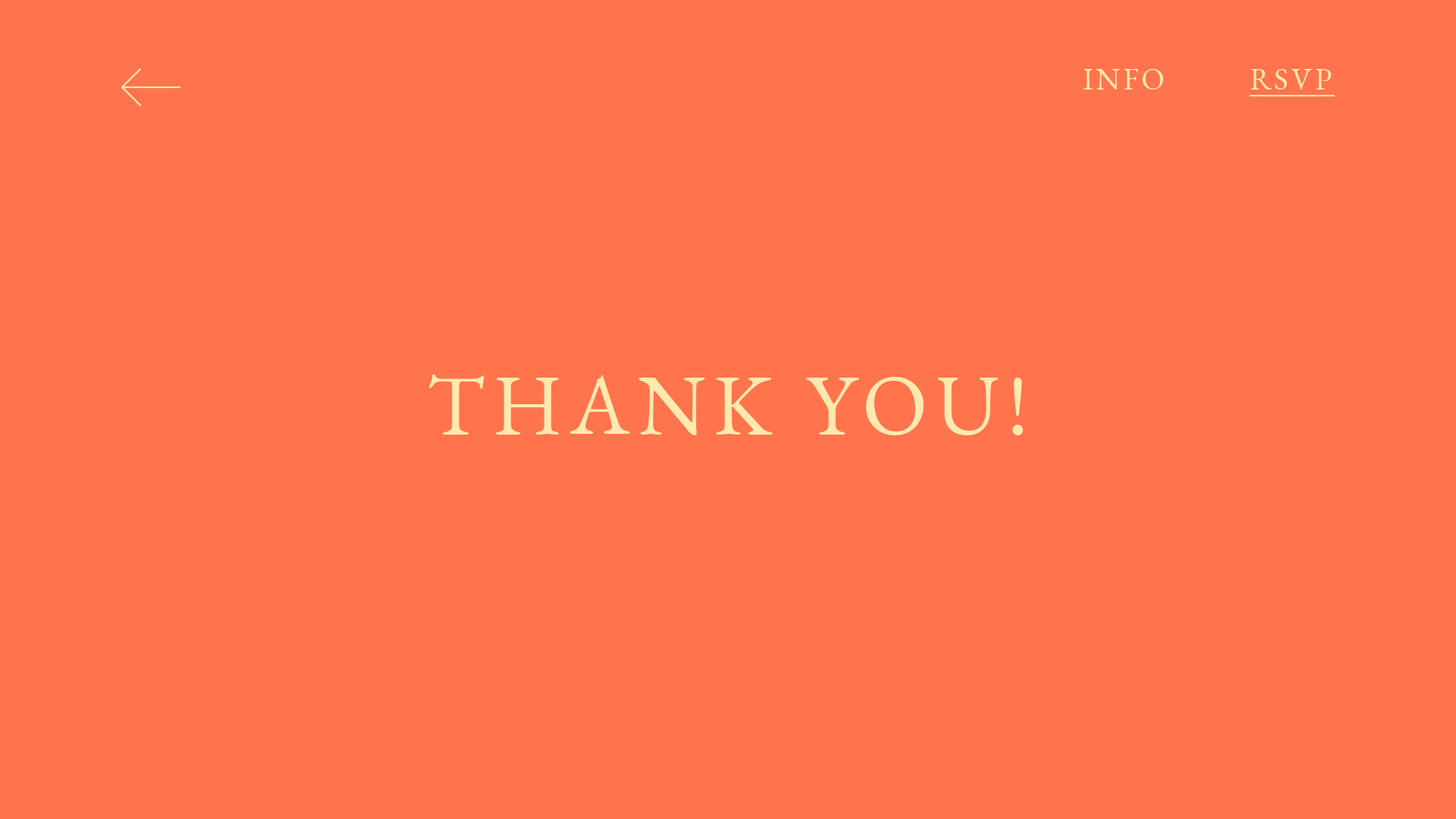
<style>
.page{position:relative;width:1456px;height:819px;background:#ff744d}
.page>*{position:absolute;margin:0}
.t1{font:30.3px "EBGaramond-Regular";letter-spacing:0.1em;color:#ffe9ae}
.t2{font:30.3px "EBGaramond-Regular";letter-spacing:0.1em;color:#ffe9ae;text-decoration:underline}
.t3{font:85.3px "EBGaramond-Regular";letter-spacing:0.1em;color:#ffe9ae}
</style>
<div class="page">
<p class="t1" style="left:1083px;top:69px;width:252px;height:28px">INFO         <span class="t2">RSVP</span></p>
<p class="t3" style="left:429px;top:374px;width:594px;height:61px">THANK YOU!</p>
</div>
